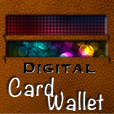
<style>
.page{position:relative;width:114px;height:114px}
.page>*{position:absolute;margin:0}
.t1{font:19.5px "Copperplate-Bold"}
.t2{font:22.3px "Noteworthy-Bold"}
</style>
<div class="page">
<p class="t1" style="left:23px;top:62px;width:72px;height:12px">Digital</p>
<p class="t2" style="left:8px;top:77px;width:46px;height:20px">Card</p>
<p class="t2" style="left:47px;top:91px;width:57px;height:20px">Wallet</p>
</div>
